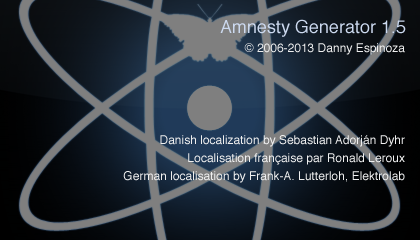
<style>
.page{position:relative;width:420px;height:240px}
.page>*{position:absolute;margin:0}
.t1{font:18px "Helvetica";color:#ccd9ef}
.t2{font:12px "Helvetica";color:#efefef}
.t3{font:12px/18px "Helvetica";color:#efefef}
</style>
<div class="page">
<p class="t1" style="left:220px;top:19px;width:186px;height:18px">Amnesty Generator 1.5</p>
<p class="t2" style="left:244px;top:43px;width:161px;height:12px">© 2006-2013 Danny Espinoza</p>
<p class="t3" style="left:123px;top:135px;width:282px;height:48px;text-align:right"><span class="t2"><br></span>Danish localization by Sebastian Adorján Dyhr<br>Localisation française par Ronald Leroux<br>German localisation by Frank-A. Lutterloh, Elektrolab</p>
</div>
